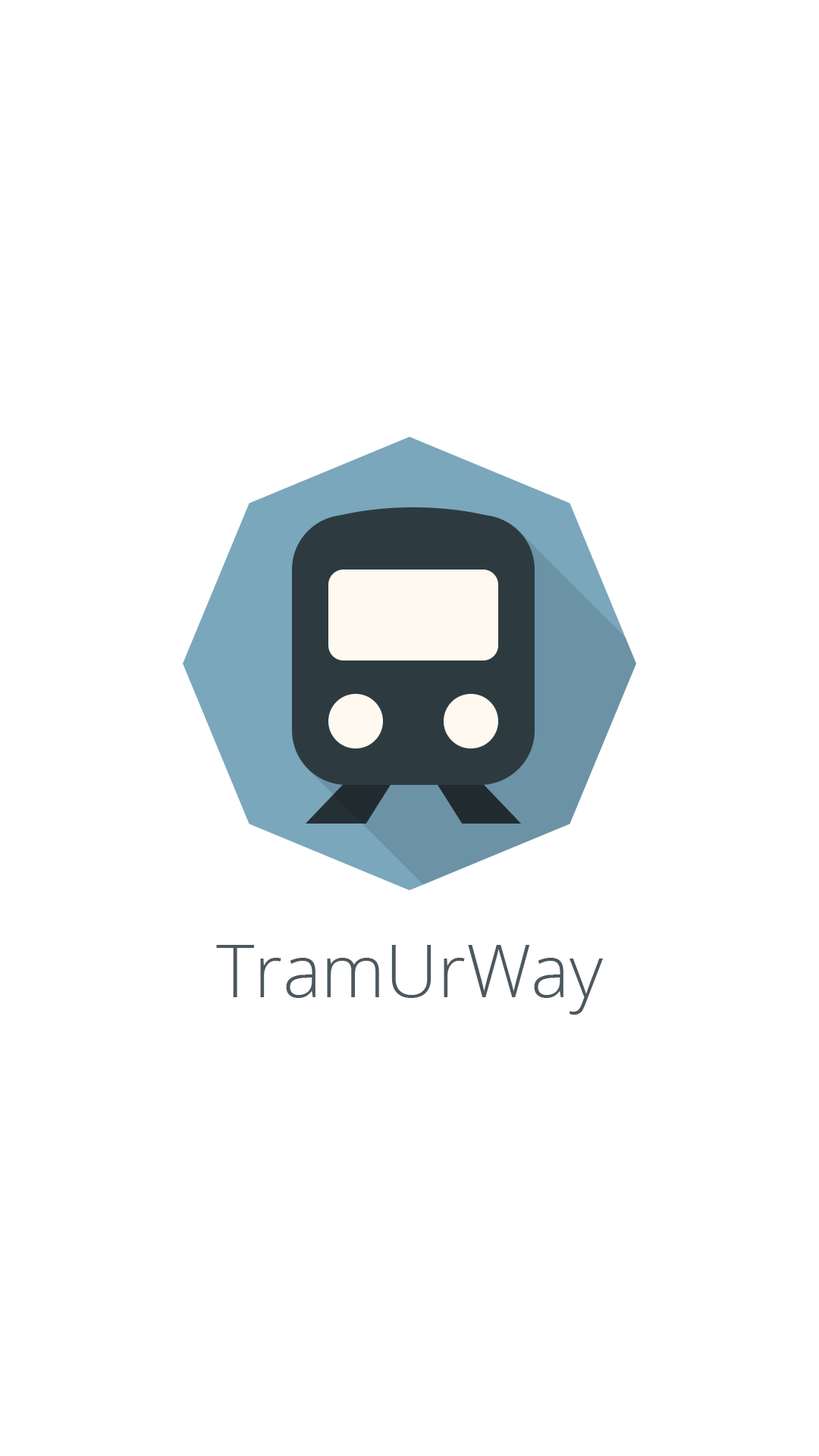
<style>
.page{position:relative;width:819px;height:1456px;background:#ffffff}
.page>*{position:absolute;margin:0}
.t1{font:72.8px "OpenSans-Light";color:#4c585d}
</style>
<div class="page">
<p class="t1" style="left:216px;top:945px;width:387px;height:70px">TramUrWay</p>
</div>
